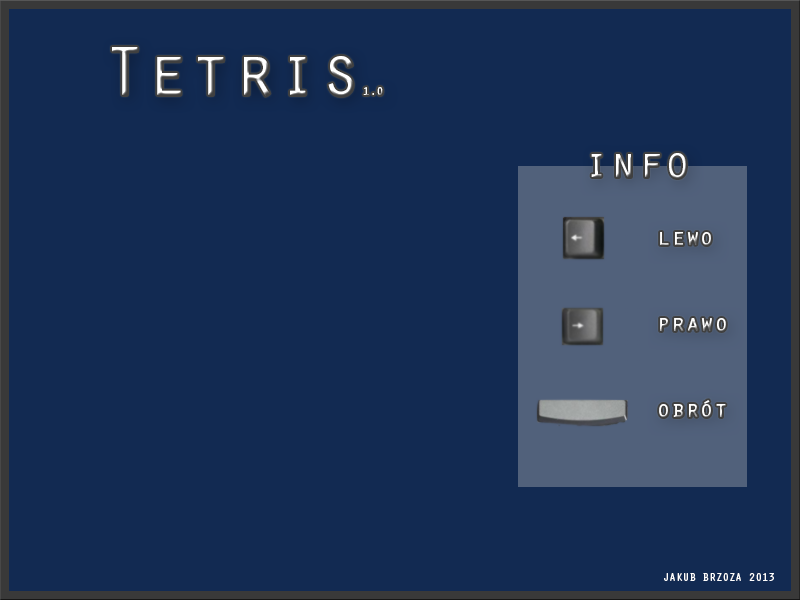
<style>
.page{position:relative;width:800px;height:600px;background:#122a52}
.page>*{position:absolute;margin:0}
.t1{font:72px "OratorStd";color:#ffffff}
.t2{font:12px "OratorStd";color:#ffffff}
.t3{font:45px "OratorStd";color:#ffffff}
.t4{font:24px "OratorStd";color:#ffffff}
.t5{font:11px "OratorStd";color:#ffffff}
</style>
<div class="page">
<p class="t1" style="left:112px;top:47px;width:271px;height:49px">Tetris<span class="t2">1.0</span></p>
<p class="t3" style="left:591px;top:153px;width:95px;height:25px">info</p>
<p class="t4" style="left:659px;top:232px;width:67px;height:185px">lewo<br><br><br>prawo<br><br><br>obrót</p>
<p class="t5" style="left:664px;top:573px;width:110px;height:8px">JAKUB BRZOZA 2013</p>
</div>
